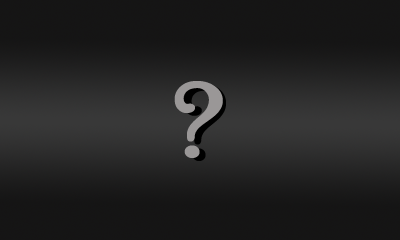
<style>
.page{position:relative;width:400px;height:240px}
.page>*{position:absolute;margin:0}
.t1{font:104.6px "PoorRichard-Regular";color:#9a9797;font-weight:bold;scale:1.14 1}
</style>
<div class="page">
<p class="t1" style="left:174px;top:81px;width:49px;height:77px">?</p>
</div>
